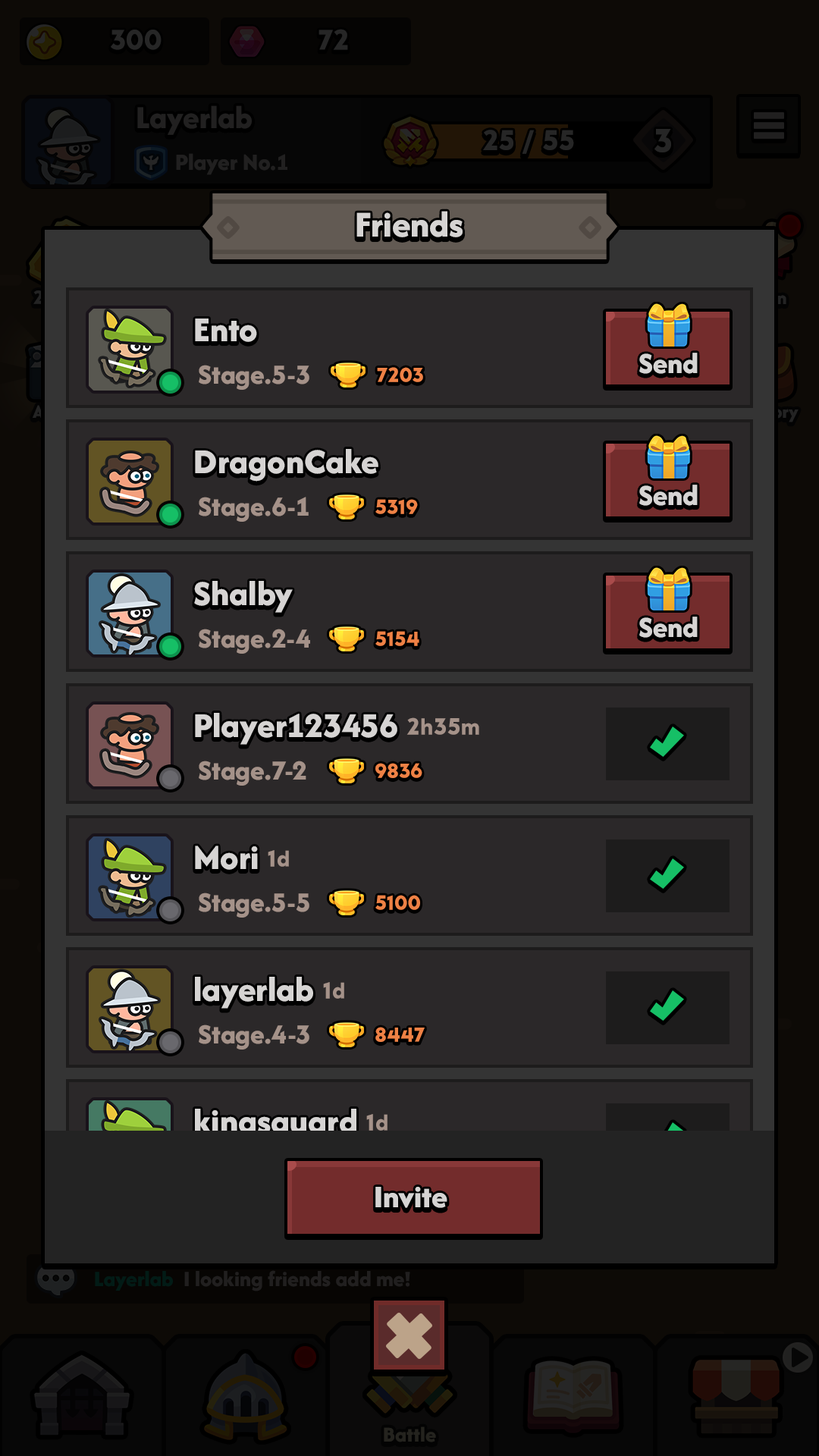
<style>
.page{position:relative;width:819px;height:1456px;background:#2b2829}
.page>*{position:absolute;margin:0}
.t1{font:37.9px "AfacadFlux-ExtraBold";color:#d6d4d3}
.t2{font:36.4px "AfacadFlux-ExtraBold";color:#d6d4d3}
.t3{font:30.3px "AfacadFlux-ExtraBold";color:#d6d4d3}
.t4{font:28.8px "AfacadFlux-ExtraBold";color:#a59289}
.t5{font:21.2px "LTAvocado-Bold";color:#ee8145}
.t6{font:24.3px "LTAvocado-Bold";color:#a59289}
.t7{font:32.8px "AfacadFlux-ExtraBold";color:#d6d4d3}
</style>
<div class="page">
<p class="t1" style="left:356px;top:211px;width:107px;height:26px">Friends</p>
<p class="t2" style="left:195px;top:318px;width:62px;height:24px">Ento</p>
<p class="t3" style="left:639px;top:353px;width:59px;height:21px">Send</p>
<p class="t4" style="left:199px;top:365px;width:110px;height:25px">Stage.5-3</p>
<p class="t5" style="left:377px;top:367px;width:46px;height:15px">7203</p>
<p class="t2" style="left:195px;top:449px;width:183px;height:33px">DragonCake</p>
<p class="t3" style="left:639px;top:485px;width:59px;height:21px">Send</p>
<p class="t4" style="left:199px;top:497px;width:110px;height:25px">Stage.6-1</p>
<p class="t5" style="left:375px;top:499px;width:43px;height:15px">5319</p>
<p class="t2" style="left:194px;top:581px;width:99px;height:32px">Shalby</p>
<p class="t3" style="left:639px;top:617px;width:59px;height:21px">Send</p>
<p class="t4" style="left:199px;top:629px;width:111px;height:25px">Stage.2-4</p>
<p class="t5" style="left:375px;top:631px;width:44px;height:15px">5154</p>
<p class="t2" style="left:195px;top:713px;width:202px;height:32px">Player123456</p>
<p class="t6" style="left:406px;top:717px;width:73px;height:18px">2h35m</p>
<p class="t4" style="left:199px;top:761px;width:107px;height:25px">Stage.7-2</p>
<p class="t5" style="left:375px;top:763px;width:47px;height:15px">9836</p>
<p class="t2" style="left:195px;top:846px;width:63px;height:24px">Mori</p>
<p class="t6" style="left:268px;top:850px;width:21px;height:17px">1d</p>
<p class="t4" style="left:199px;top:893px;width:110px;height:25px">Stage.5-5</p>
<p class="t5" style="left:375px;top:895px;width:45px;height:15px">5100</p>
<p class="t2" style="left:195px;top:977px;width:118px;height:32px">layerlab</p>
<p class="t6" style="left:323px;top:982px;width:21px;height:17px">1d</p>
<p class="t4" style="left:199px;top:1024px;width:110px;height:26px">Stage.4-3</p>
<p class="t5" style="left:375px;top:1027px;width:50px;height:15px">8447</p>
<p class="t2" style="left:195px;top:1109px;width:161px;height:32px">kingsguard</p>
<p class="t6" style="left:366px;top:1114px;width:22px;height:17px">1d</p>
<p class="t7" style="left:375px;top:1187px;width:72px;height:21px">Invite</p>
</div>
